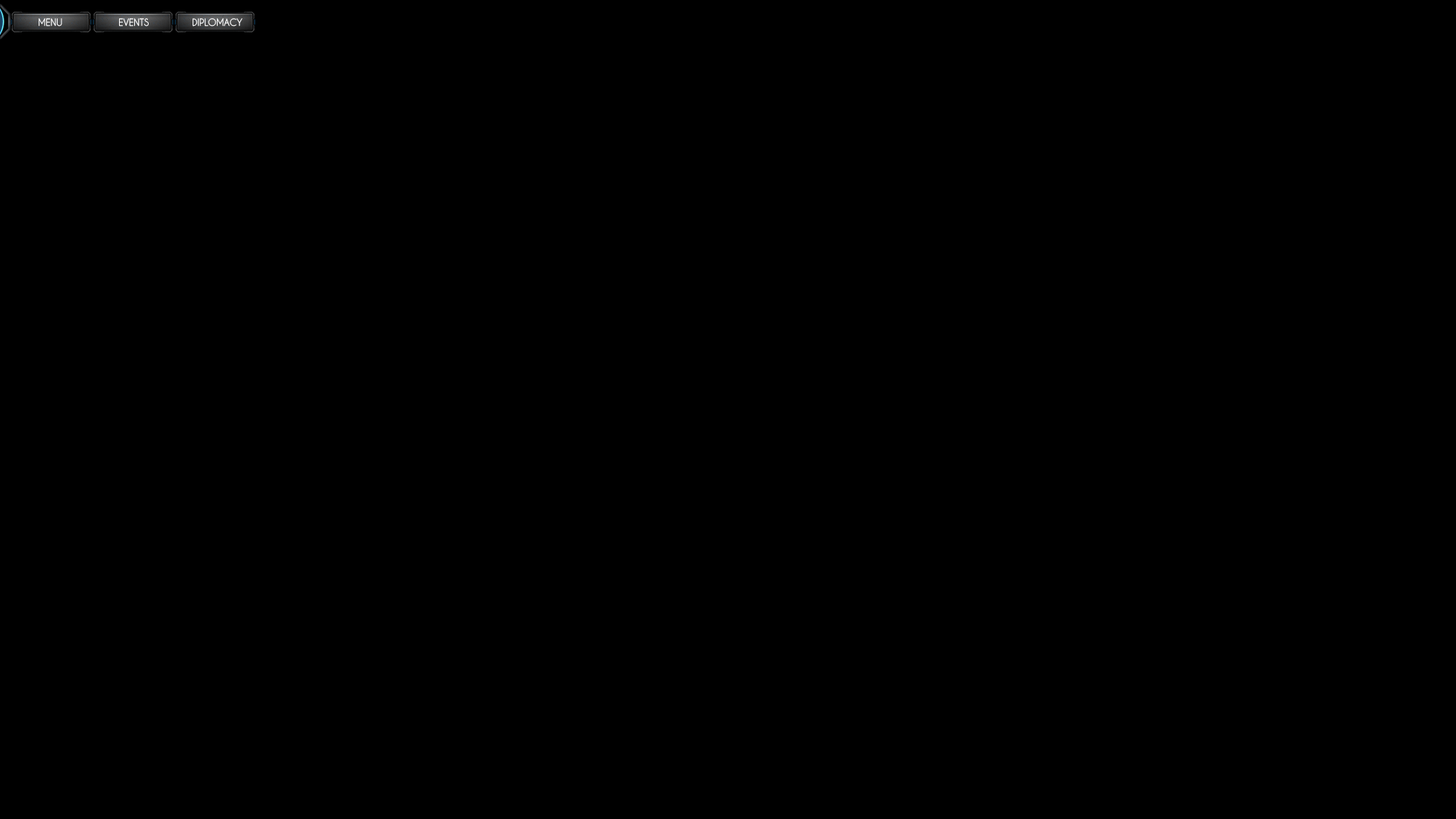
<style>
.page{position:relative;width:1456px;height:819px;background:#000000}
.page>*{position:absolute;margin:0}
.t1{font:9.1px "CaviarDreams";color:#ffffff}
</style>
<div class="page">
<p class="t1" style="left:39px;top:18px;width:23px;height:9px">MENU</p>
<p class="t1" style="left:119px;top:18px;width:30px;height:9px">EVENTS</p>
<p class="t1" style="left:193px;top:18px;width:50px;height:9px">DIPLOMACY</p>
</div>
